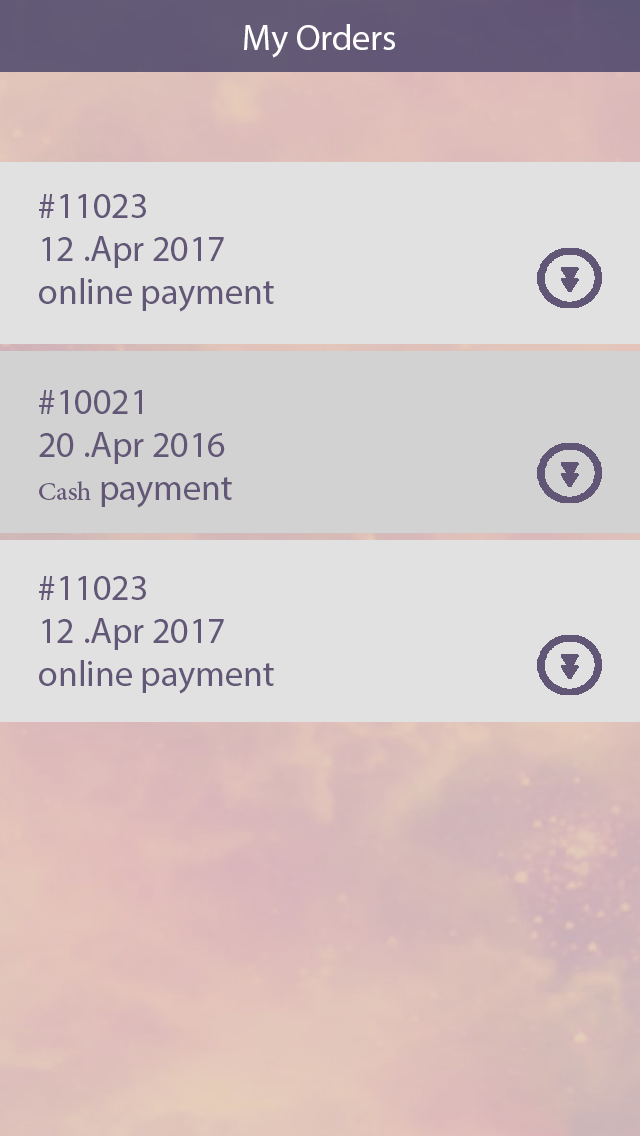
<style>
.page{position:relative;width:640px;height:1136px;background:#e1e1e1}
.page>*{position:absolute;margin:0}
.t1{font:36px "MyriadPro-Regular";color:#ffffff}
.t2{font:36px "MyriadPro-Regular";color:#625776}
.t3{font:36px "AdobeArabic-Regular";color:#625776}
</style>
<div class="page">
<p class="t1" style="left:244px;top:24px;width:151px;height:34px">My Orders</p>
<p class="t2" style="left:39px;top:194px;width:235px;height:118px;text-align:right">11023#<br>2017 Apr. 12<br>online payment</p>
<p class="t2" style="left:39px;top:390px;width:193px;height:118px;text-align:right">10021#<br>2016 Apr. 20<br><span class="t3">Cash </span>payment</p>
<p class="t2" style="left:39px;top:576px;width:235px;height:118px;text-align:right">11023#<br>2017 Apr. 12<br>online payment</p>
</div>
